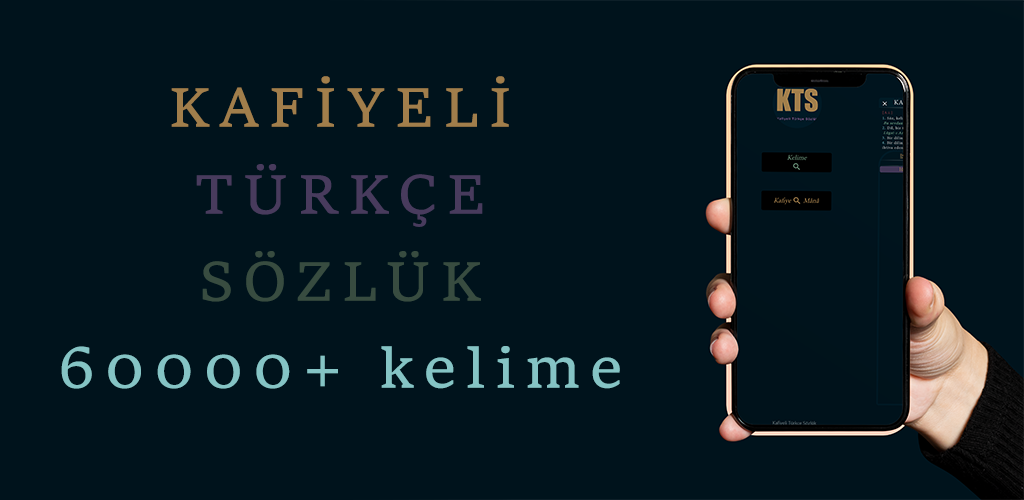
<style>
.page{position:relative;width:1024px;height:500px;background:#00131c}
.page>*{position:absolute;margin:0}
.t1{font:58px/87px "Sitka-Small";letter-spacing:0.16em;color:#85c4c5}
.t2{font:58px/87px "Sitka-Small";letter-spacing:0.16em;color:#a17e4b}
.t3{font:58px/87px "Sitka-Small";letter-spacing:0.16em;color:#483b5d}
.t4{font:58px/87px "Sitka-Small";letter-spacing:0.16em;color:#384c40}
</style>
<div class="page">
<p class="t1" style="left:61px;top:76px;width:559px;height:313px;text-align:center"><span class="t2">KAFİYELİ<br></span><span class="t3">TÜRKÇE<br></span><span class="t4">SÖZLÜK<br></span>60000+ kelime</p>
</div>
